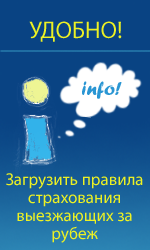
<style>
.page{position:relative;width:150px;height:250px;background:#094383}
.page>*{position:absolute;margin:0}
.t1{font:24px "MyriadPro-Regular";color:#edf123}
.t2{font:20px "ForteMT";color:#2a96d3}
.t3{font:17px/18px "MyriadPro-Regular";color:#edf123}
</style>
<div class="page">
<p class="t1" style="left:29px;top:21px;width:93px;height:21px">УДОБНО!</p>
<p class="t2" style="left:82px;top:81px;width:40px;height:18px">info!</p>
<p class="t3" style="left:6px;top:173px;width:137px;height:70px;text-align:center">Загрузить правила страхования <br>выезжающих за рубеж</p>
</div>
